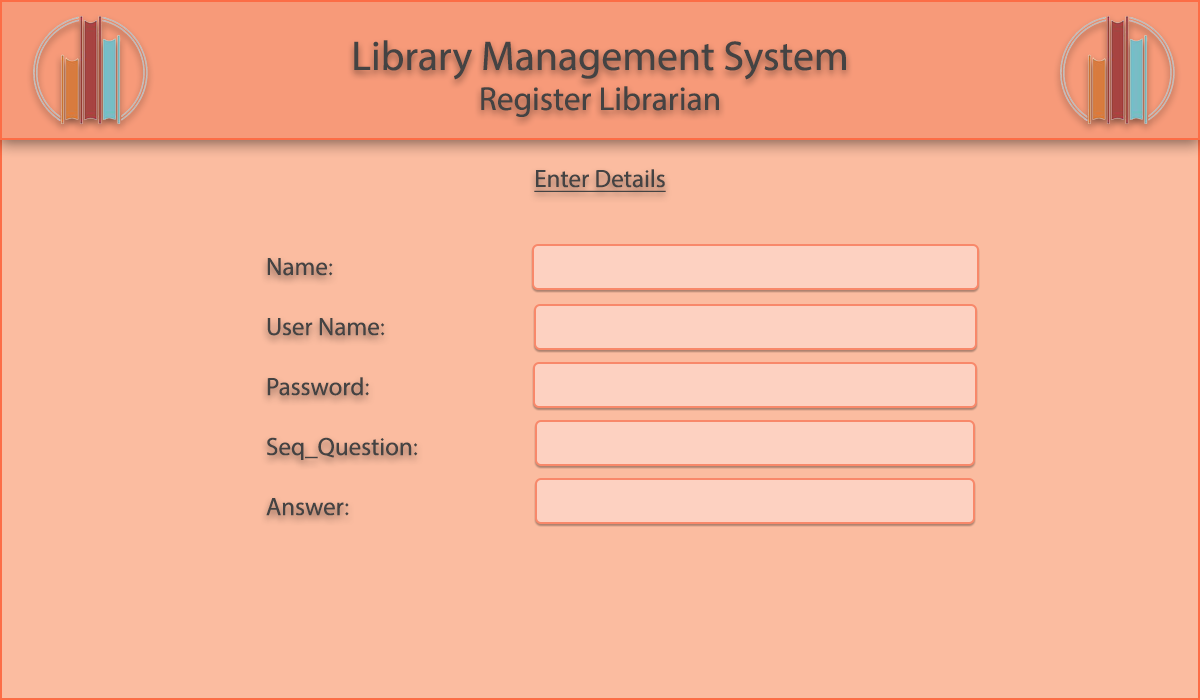
<style>
.page{position:relative;width:1200px;height:700px;background:#fbbca0}
.page>*{position:absolute;margin:0}
.t1{font:41.7px "MyriadPro-Regular";color:#444343}
.t2{font:33.3px "MyriadPro-Regular";color:#444343}
.t3{font:25px "MyriadPro-Regular";color:#444343;text-decoration:underline}
.t4{font:25px "MyriadPro-Regular";color:#444343}
</style>
<div class="page">
<p class="t1" style="left:354px;top:40px;width:492px;height:77px;text-align:center">Library Management System<br><span class="t2">Register Librarian</span></p>
<p class="t3" style="left:534px;top:169px;width:132px;height:23px">Enter Details</p>
<p class="t4" style="left:266px;top:258px;width:152px;height:258px">Name: <br><br>User Name: <br><br>Password: <br><br>Seq_Question: <br><br>Answer:</p>
</div>
